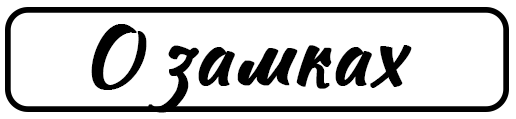
<style>
.page{position:relative;width:516px;height:119px;background:#ffffff}
.page>*{position:absolute;margin:0}
.t1{font:78.7px "Sweet-Mavka-Script";color:#000000;font-weight:bold}
</style>
<div class="page">
<p class="t1" style="left:91px;top:24px;width:321px;height:89px">О замках</p>
</div>
